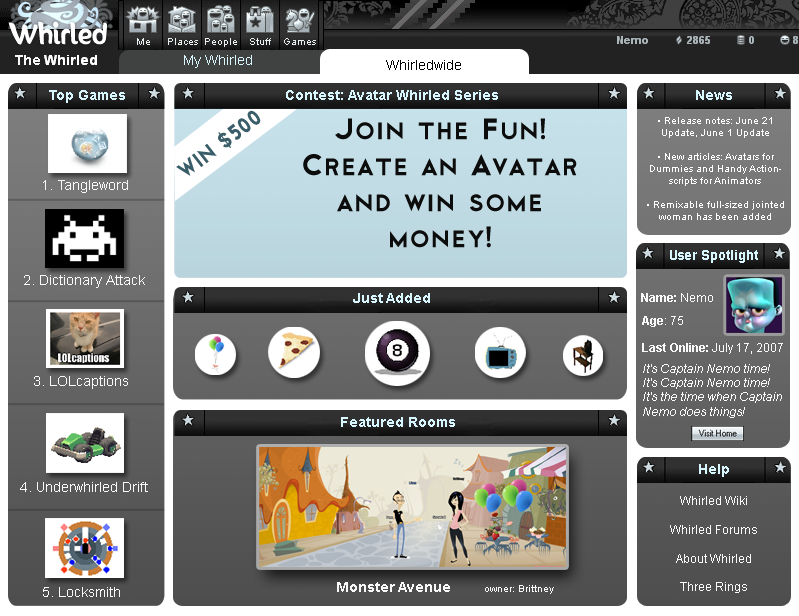
<style>
.page{position:relative;width:799px;height:616px}
.page>*{position:absolute;margin:0}
.t1{font:14px "Arial-BoldMT";color:#f9f9f9}
.t2{font:14px "ArialMT";color:#d8f6fe}
.t3{font:14px "ArialMT";color:#000000}
.t4{font:14px "Arial-BoldMT";color:#d8f6fe}
.t5{font:21.9px "Cityof";color:#3a5e69;scale:0.91 1}
.t6{font:30px "Cityof";color:#0c0c0c}
.t7{font:30px "Cityof";color:#3a5e69}
.t8{font:10px "ArialMT";color:#ffffff}
.t9{font:14px "ArialMT";color:#f9f9f9}
.t10{font:14px "Arial-BoldMT";color:#d8f6fe;scale:0.95 1}
.t11{font:12px "Arial-BoldMT";color:#f9f9f9}
.t12{font:12px "ArialMT";color:#f9f9f9}
.t13{font:12px "Arial-ItalicMT";color:#f9f9f9}
.t14{font:10px "ArialMT";color:#f9f9f9}
</style>
<div class="page">
<p class="t1" style="left:15px;top:55px;width:25px;height:10px">The</p>
<p class="t2" style="left:184px;top:55px;width:68px;height:13px">My Whirled</p>
<p class="t3" style="left:386px;top:60px;width:75px;height:10px">Whirledwide</p>
<p class="t4" style="left:49px;top:90px;width:76px;height:13px">Top Games</p>
<p class="t4" style="left:286px;top:90px;width:212px;height:10px">Contest: Avatar Whirled Series</p>
<p class="t4" style="left:696px;top:90px;width:36px;height:10px">News</p>
<p class="t5" style="left:176px;top:110px;width:85px;height:66px;rotate:-37deg">WIN $500</p>
<p class="t6" style="left:303px;top:118px;width:274px;height:130px;text-align:center">Join the Fun! Create an Avatar and win some money!<br><span class="t7">!</span></p>
<p class="t8" style="left:647px;top:117px;width:137px;height:103px;text-align:center">• Release notes: June 21 Update, June 1 Update<br><br>• New articles: Avatars for Dummies and Handy Actionscripts for Animators <br><br>• Remixable full-sized jointed woman has been added</p>
<p class="t9" style="left:43px;top:180px;width:85px;height:13px">1. Tangleword</p>
<p class="t10" style="left:670px;top:250px;width:88px;height:13px">User Spotlight</p>
<p class="t9" style="left:24px;top:275px;width:121px;height:13px">2. Dictionary Attack</p>
<p class="t4" style="left:353px;top:293px;width:77px;height:10px">Just Added</p>
<p class="t11" style="left:641px;top:293px;width:72px;height:9px">Name: <span class="t12">Nemo</span></p>
<p class="t12" style="left:642px;top:316px;width:41px;height:11px"><span class="t11">Age</span>: 75</p>
<p class="t12" style="left:642px;top:343px;width:141px;height:11px"><span class="t11">Last Online: </span>July 17, 2007</p>
<p class="t13" style="left:643px;top:364px;width:139px;height:54px">It's Captain Nemo time! It's Captain Nemo time! It's the time when Captain Nemo does things!</p>
<p class="t9" style="left:34px;top:376px;width:94px;height:13px">3. LOLcaptions</p>
<p class="t4" style="left:341px;top:417px;width:114px;height:10px">Featured Rooms</p>
<p class="t4" style="left:699px;top:464px;width:30px;height:13px">Help</p>
<p class="t9" style="left:20px;top:482px;width:128px;height:10px">4. Underwhirled Drift</p>
<p class="t12" style="left:670px;top:496px;width:87px;height:97px;text-align:center">Whirled Wiki<br><br>Whirled Forums<br><br>About Whirled<br><br>Three Rings</p>
<p class="t14" style="left:337px;top:582px;width:217px;height:12px"><span class="t1">Monster Avenue</span>           owner: Brittney</p>
<p class="t9" style="left:43px;top:587px;width:77px;height:10px">5. Locksmith</p>
</div>
